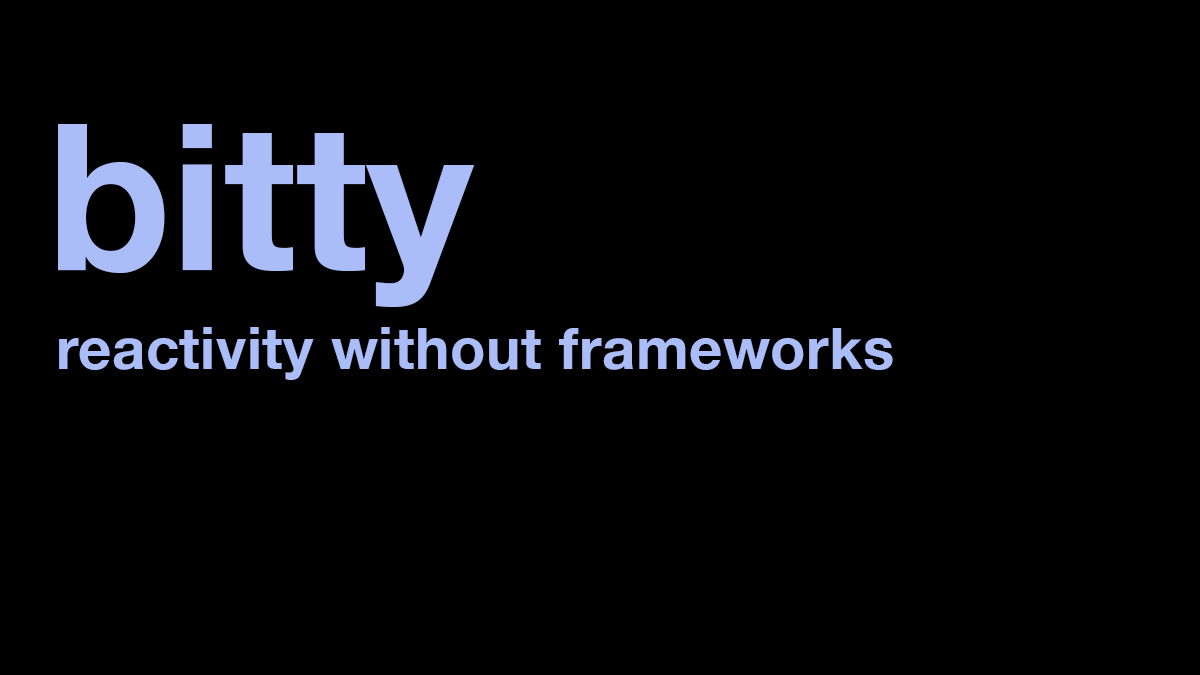
<style>
.page{position:relative;width:1200px;height:675px;background:#000000}
.page>*{position:absolute;margin:0}
.t1{font:204px "HelveticaNeue-Bold";color:#abbdf8}
.t2{font:58px "HelveticaNeue-Bold";letter-spacing:0.01em;color:#abbdf8}
</style>
<div class="page">
<p class="t1" style="left:58px;top:124px;width:417px;height:183px">bitty</p>
<p class="t2" style="left:59px;top:327px;width:834px;height:53px">reactivity without frameworks</p>
</div>
